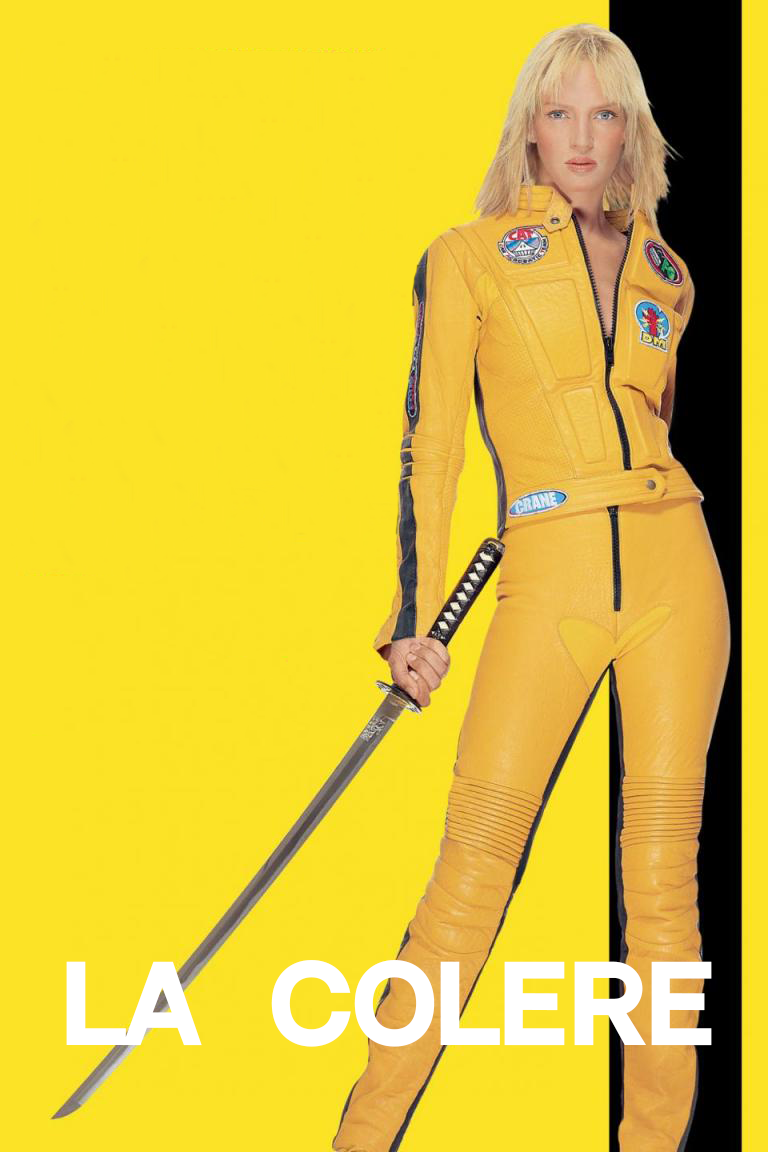
<style>
.page{position:relative;width:768px;height:1152px;background:#fce326}
.page>*{position:absolute;margin:0}
.t1{font:102.8px "NeutralFaceBold";letter-spacing:0.005em;color:#ffffff}
</style>
<div class="page">
<p class="t1" style="left:66px;top:960px;width:646px;height:87px">la  colere</p>
</div>
